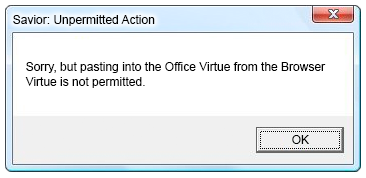
<style>
.page{position:relative;width:366px;height:178px;background:#ffffff}
.page>*{position:absolute;margin:0}
.t1{font:12px "ArialMT";color:#000000}
.t2{font:12px/11px "ArialMT";color:#000000}
</style>
<div class="page">
<p class="t1" style="left:13px;top:15px;width:142px;height:11px">Savior: Unpermitted Action</p>
<p class="t2" style="left:25px;top:62px;width:301px;height:26px">Sorry, but pasting into the Office Virtue from the Browser <br>Virtue is not permitted.</p>
<p class="t1" style="left:292px;top:135px;width:17px;height:9px">OK</p>
</div>
